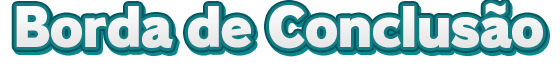
<style>
.page{position:relative;width:560px;height:66px;background:#ffffff}
.page>*{position:absolute;margin:0}
.t1{font:52px "RodinPro-UB";letter-spacing:-0.039em;color:#efefef}
</style>
<div class="page">
<p class="t1" style="left:16px;top:3px;width:527px;height:46px">Borda de Conclusão</p>
</div>
